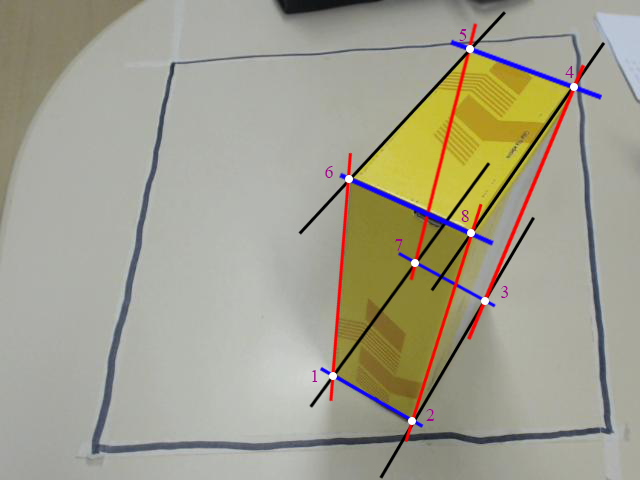
<style>
.page{position:relative;width:640px;height:480px}
.page>*{position:absolute;margin:0}
.t1{font:18px "TimesNewRomanPSMT";color:#a4008f}
</style>
<div class="page">
<p class="t1" style="left:459px;top:29px;width:8px;height:12px">5</p>
<p class="t1" style="left:565px;top:66px;width:9px;height:12px">4</p>
<p class="t1" style="left:325px;top:166px;width:8px;height:12px">6</p>
<p class="t1" style="left:461px;top:210px;width:8px;height:12px">8</p>
<p class="t1" style="left:395px;top:239px;width:8px;height:12px">7</p>
<p class="t1" style="left:501px;top:286px;width:7px;height:12px">3</p>
<p class="t1" style="left:312px;top:370px;width:6px;height:12px">1</p>
<p class="t1" style="left:426px;top:409px;width:9px;height:12px">2</p>
</div>
